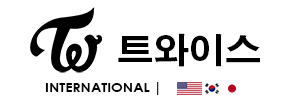
<style>
.page{position:relative;width:288px;height:100px;background:#ffffff}
.page>*{position:absolute;margin:0}
.t1{font:34.2px "AdobeGothicStd-Bold";color:#000000;scale:1.05 1}
.t2{font:13.3px "CenturyGothic-Bold";color:#000000;scale:1.05 1}
</style>
<div class="page">
<p class="t1" style="left:118px;top:33px;width:142px;height:34px">트와이스</p>
<p class="t2" style="left:45px;top:82px;width:114px;height:13px">INTERNATIONAL |</p>
</div>
